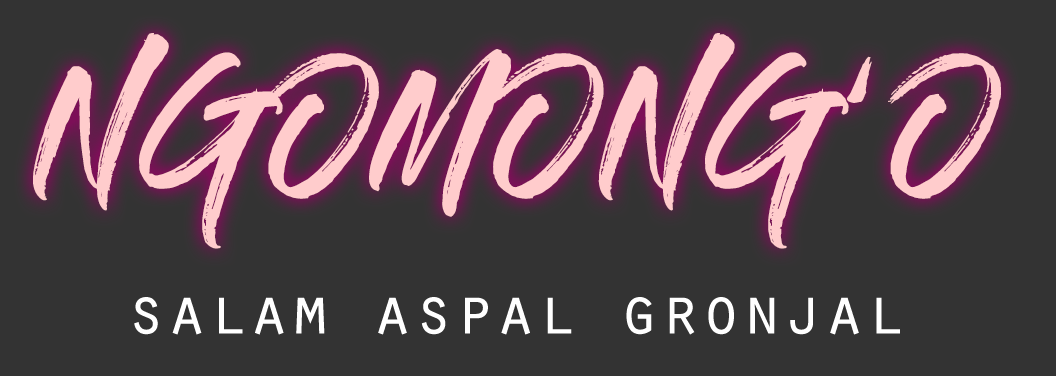
<style>
.page{position:relative;width:1056px;height:376px;background:#333333}
.page>*{position:absolute;margin:0}
.t1{font:136px "GlossAndBloom";color:#ffcccc}
.t2{font:68.5px "OratorStd";color:#ffffff}
</style>
<div class="page">
<p class="t1" style="left:33px;top:33px;width:968px;height:216px">NGOMONG’O</p>
<p class="t2" style="left:134px;top:297px;width:766px;height:38px">salam aspal gronjal</p>
</div>
